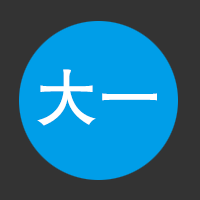
<style>
.page{position:relative;width:200px;height:200px;background:#333333}
.page>*{position:absolute;margin:0}
.t1{font:62.7px "FZHTJW--GB1-0";color:#ffffff}
</style>
<div class="page">
<p class="t1" style="left:37px;top:69px;width:120px;height:57px">大一</p>
</div>
